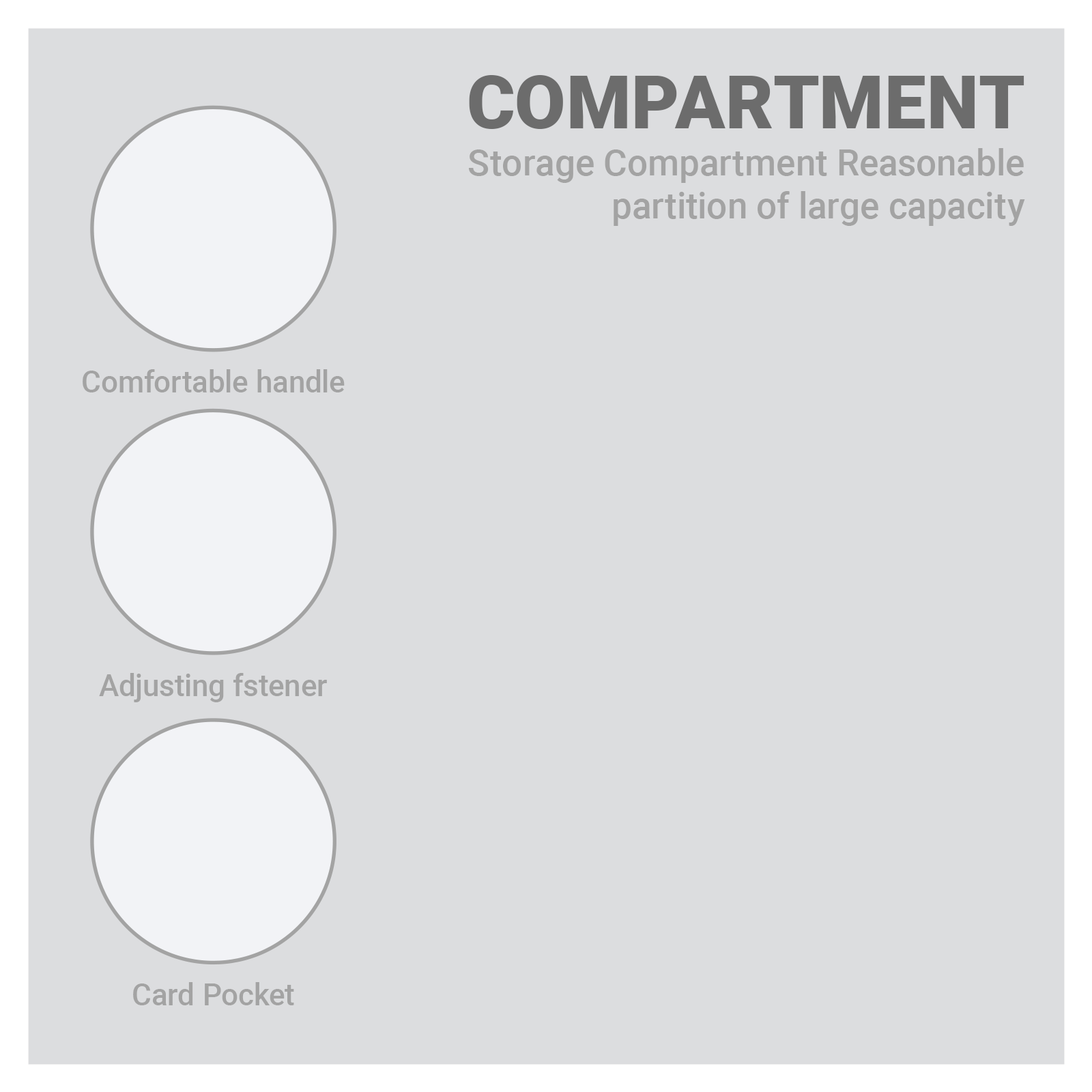
<style>
.page{position:relative;width:1092px;height:1092px;background:#dcdddf}
.page>*{position:absolute;margin:0}
.t1{font:74px "Roboto-Black";color:#6c6c6c}
.t2{font:36.2px "Roboto-Medium";color:#a3a3a3}
.t3{font:30.4px "Roboto-Medium";color:#a3a3a3}
</style>
<div class="page">
<p class="t1" style="left:469px;top:75px;width:555px;height:54px">COMPARTMENT</p>
<p class="t2" style="left:468px;top:148px;width:557px;height:78px;text-align:right">Storage Compartment Reasonable<br>partition of large capacity</p>
<p class="t3" style="left:83px;top:369px;width:262px;height:23px">Comfortable handle</p>
<p class="t3" style="left:99px;top:673px;width:228px;height:29px">Adjusting fstener</p>
<p class="t3" style="left:133px;top:982px;width:161px;height:23px">Card Pocket</p>
</div>
